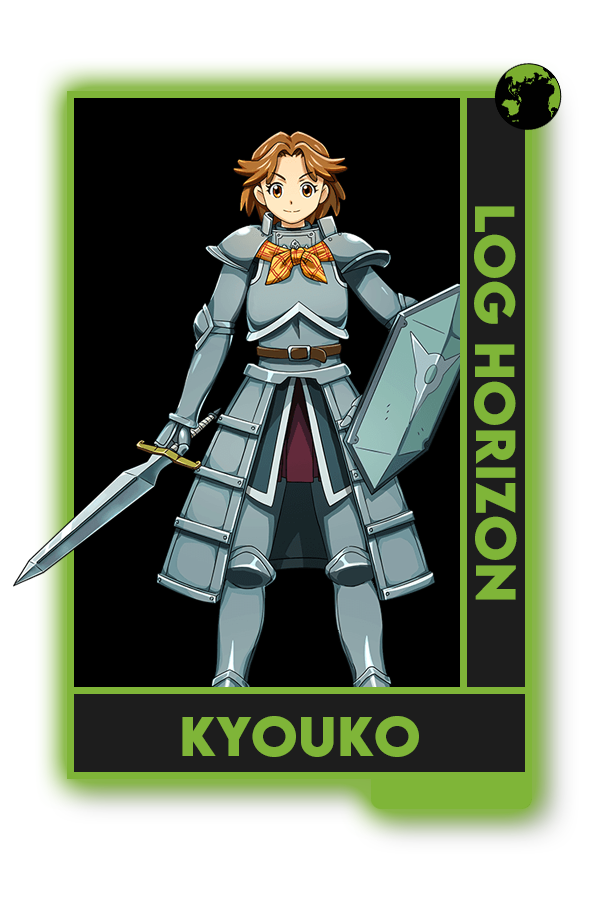
<style>
.page{position:relative;width:600px;height:900px;background:#000000}
.page>*{position:absolute;margin:0}
.t1{font:50px "LEMONMILK-Bold";color:#7fad41}
</style>
<div class="page">
<p class="t1" style="left:474px;top:206px;width:43px;height:394px;rotate:90deg">Log Horizon</p>
<p class="t1" style="left:182px;top:716px;width:237px;height:41px">Kyouko</p>
</div>
